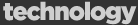
<style>
.page{position:relative;width:138px;height:25px;background:#333333}
.page>*{position:absolute;margin:0}
.t1{font:25px "GothamBlack";letter-spacing:-0.05em;color:#cfcfcf}
</style>
<div class="page">
<p class="t1" style="left:3px;top:1px;width:134px;height:24px">technology</p>
</div>
